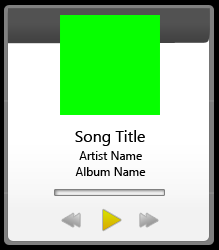
<style>
.page{position:relative;width:219px;height:250px;background:#ffffff}
.page>*{position:absolute;margin:0}
.t1{font:16px "SegoeUI";color:#000000}
.t2{font:12px "SegoeUI";color:#000000}
</style>
<div class="page">
<p class="t1" style="left:75px;top:130px;width:70px;height:16px">Song Title</p>
<p class="t2" style="left:79px;top:151px;width:63px;height:9px">Artist Name</p>
<p class="t2" style="left:75px;top:167px;width:71px;height:9px">Album Name</p>
</div>
